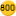
<style>
.page{position:relative;width:16px;height:16px}
.page>*{position:absolute;margin:0}
.t1{font:10px "240MKSD-ALa";color:#000000}
</style>
<div class="page">
<p class="t1" style="left:0px;top:4px;width:15px;height:7px">800</p>
</div>
